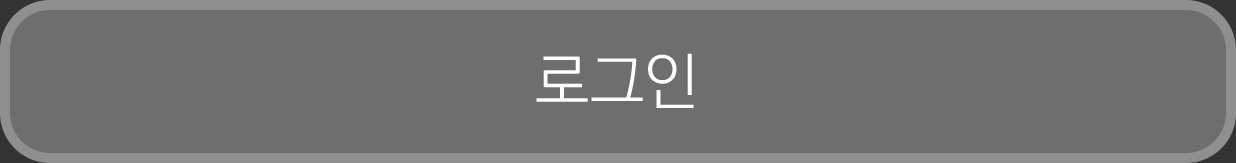
<style>
.page{position:relative;width:1236px;height:163px;background:#6e6e6e}
.page>*{position:absolute;margin:0}
.t1{font:62.5px "KoPubDotumLight";color:#ffffff}
</style>
<div class="page">
<p class="t1" style="left:536px;top:53px;width:158px;height:55px">로그인</p>
</div>
